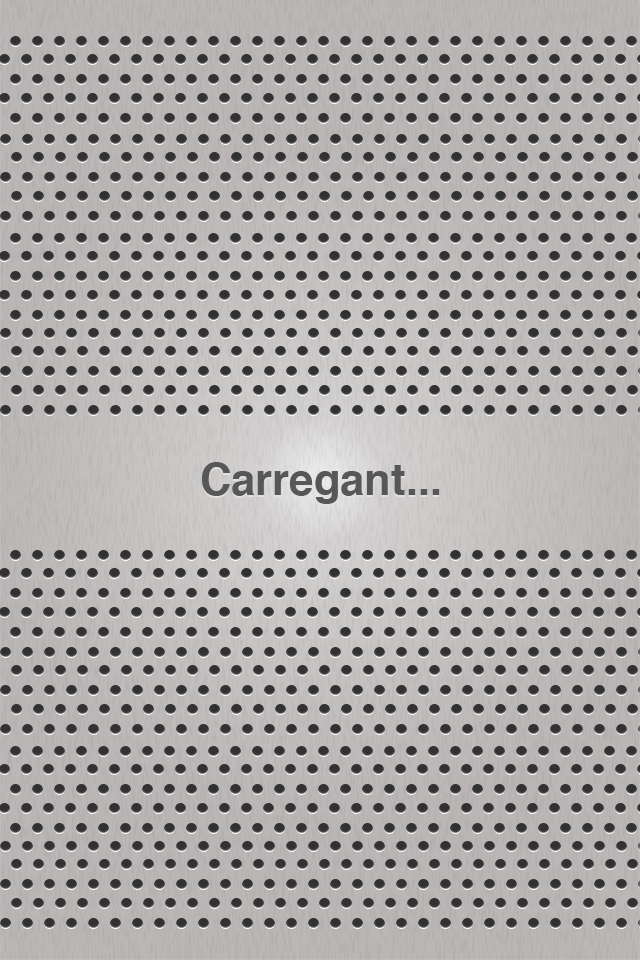
<style>
.page{position:relative;width:640px;height:960px}
.page>*{position:absolute;margin:0}
.t1{font:43.6px "Helvetica-Bold";color:#585757}
</style>
<div class="page">
<p class="t1" style="left:201px;top:462px;width:239px;height:42px">Carregant...</p>
<p class="t1" style="left:201px;top:464px;width:239px;height:42px">Carregant...</p>
</div>
